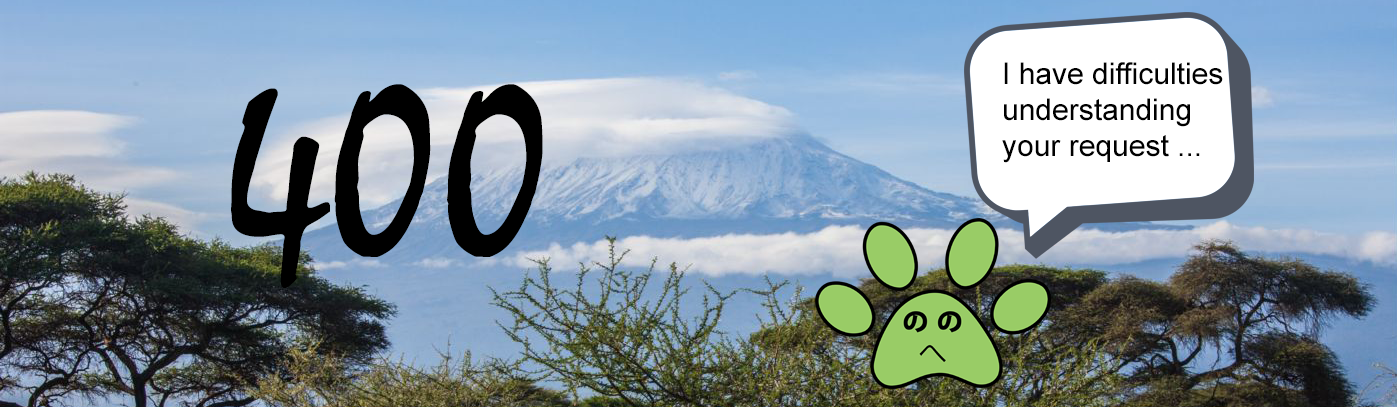
<style>
.page{position:relative;width:1397px;height:407px}
.page>*{position:absolute;margin:0}
.t1{font:30px "ArialMT";color:#000000}
.t2{font:250px "Mistral";color:#000000}
</style>
<div class="page">
<p class="t1" style="left:1002px;top:62px;width:221px;height:101px">I have difficulties<br>understanding<br>your request ...</p>
<p class="t2" style="left:231px;top:84px;width:312px;height:204px">400</p>
</div>
